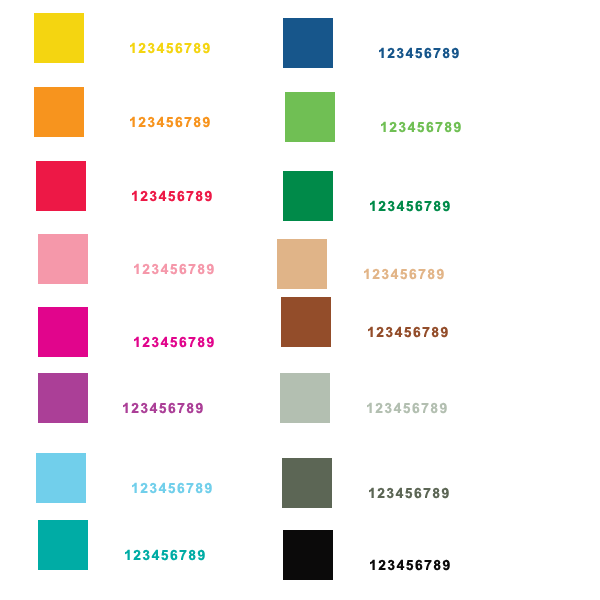
<style>
.page{position:relative;width:600px;height:600px;background:#ffffff}
.page>*{position:absolute;margin:0}
.t1{font:14px "Arial-BoldMT";letter-spacing:0.1em;color:#f4d511}
.t2{font:14px "Arial-BoldMT";letter-spacing:0.1em;color:#17568b}
.t3{font:14px "Arial-BoldMT";letter-spacing:0.1em;color:#f7941e}
.t4{font:14px "Arial-BoldMT";letter-spacing:0.1em;color:#70bf54}
.t5{font:14px "Arial-BoldMT";letter-spacing:0.1em;color:#ed1846}
.t6{font:14px "Arial-BoldMT";letter-spacing:0.1em;color:#008a49}
.t7{font:14px "Arial-BoldMT";letter-spacing:0.1em;color:#f598aa}
.t8{font:14px "Arial-BoldMT";letter-spacing:0.1em;color:#e2b588}
.t9{font:14px "Arial-BoldMT";letter-spacing:0.1em;color:#934d2a}
.t10{font:14px "Arial-BoldMT";letter-spacing:0.1em;color:#e1058c}
.t11{font:14px "Arial-BoldMT";letter-spacing:0.1em;color:#ab3f97}
.t12{font:14px "Arial-BoldMT";letter-spacing:0.1em;color:#b3bfb1}
.t13{font:14px "Arial-BoldMT";letter-spacing:0.1em;color:#71cfeb}
.t14{font:14px "Arial-BoldMT";letter-spacing:0.1em;color:#5c6655}
.t15{font:14px "Arial-BoldMT";letter-spacing:0.1em;color:#00aca5}
.t16{font:14px "Arial-BoldMT";letter-spacing:0.1em;color:#0b0a0a}
</style>
<div class="page">
<p class="t1" style="left:130px;top:42px;width:80px;height:12px">123456789</p>
<p class="t2" style="left:379px;top:47px;width:80px;height:12px">123456789</p>
<p class="t3" style="left:130px;top:116px;width:80px;height:12px">123456789</p>
<p class="t4" style="left:381px;top:121px;width:80px;height:12px">123456789</p>
<p class="t5" style="left:132px;top:190px;width:80px;height:12px">123456789</p>
<p class="t6" style="left:370px;top:200px;width:80px;height:12px">123456789</p>
<p class="t7" style="left:134px;top:263px;width:80px;height:12px">123456789</p>
<p class="t8" style="left:364px;top:268px;width:80px;height:12px">123456789</p>
<p class="t9" style="left:368px;top:326px;width:80px;height:12px">123456789</p>
<p class="t10" style="left:134px;top:336px;width:80px;height:12px">123456789</p>
<p class="t11" style="left:123px;top:402px;width:80px;height:12px">123456789</p>
<p class="t12" style="left:367px;top:402px;width:80px;height:12px">123456789</p>
<p class="t13" style="left:132px;top:482px;width:80px;height:12px">123456789</p>
<p class="t14" style="left:369px;top:487px;width:80px;height:12px">123456789</p>
<p class="t15" style="left:125px;top:549px;width:80px;height:12px">123456789</p>
<p class="t16" style="left:370px;top:559px;width:80px;height:12px">123456789</p>
</div>
